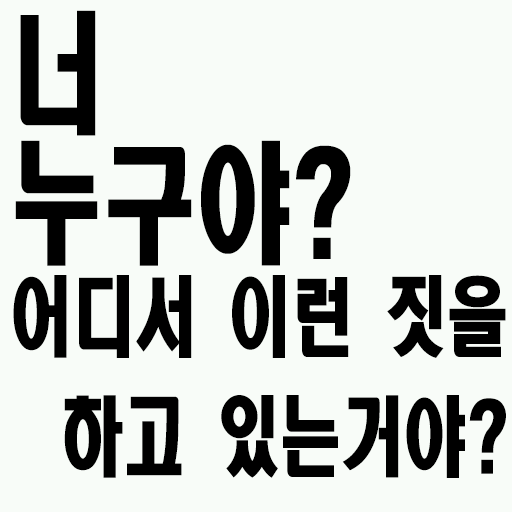
<style>
.page{position:relative;width:512px;height:512px;background:#f8fcf8}
.page>*{position:absolute;margin:0}
.t1{font:129.6px/130px "HeadlineR-HM";color:#000000;scale:0.72 1}
.t2{font:86.4px/120px "HeadlineR-HM";color:#000000;scale:0.72 1}
</style>
<div class="page">
<p class="t1" style="left:15px;top:10px;width:336px;height:256px">너<br>누구야?</p>
<p class="t2" style="left:13px;top:275px;width:493px;height:203px;text-align:right">어디서 이런 짓을<br>하고 있는거야?</p>
</div>
